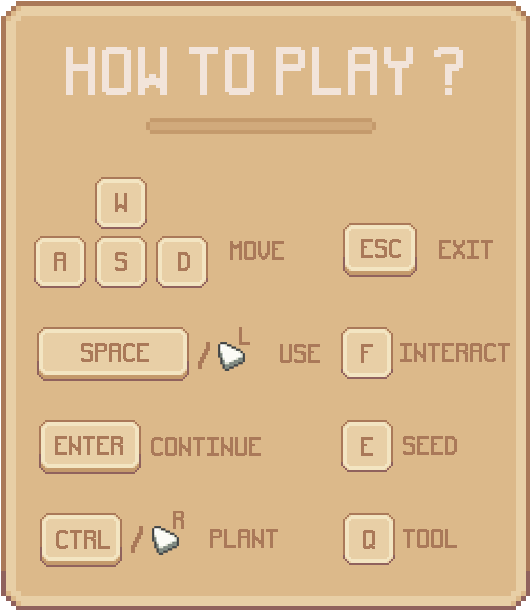
<style>
.page{position:relative;width:530px;height:610px;background:#dcb98a}
.page>*{position:absolute;margin:0}
.t1{font:61.8px "pixelFont-7-8x14-sproutLands";color:#f2e4da;scale:1.05 1}
.t2{font:24.6px "pixelFont-7-8x14-sproutLands";color:#aa7959;scale:1.05 1}
.t3{font:23.8px "pixelFont-7-8x14-sproutLands";color:#aa7959;scale:1.05 1}
.t4{font:35.1px "pixelFont-7-8x14-sproutLands";color:#aa7959;scale:1.05 1}
</style>
<div class="page">
<p class="t1" style="left:66px;top:47px;width:397px;height:48px">HOW TO PLAY ?</p>
<p class="t2" style="left:115px;top:193px;width:12px;height:19px">w</p>
<p class="t2" style="left:230px;top:241px;width:54px;height:19px">MOVE</p>
<p class="t2" style="left:361px;top:239px;width:40px;height:19px">esc</p>
<p class="t2" style="left:439px;top:240px;width:54px;height:19px">EXIT</p>
<p class="t2" style="left:54px;top:252px;width:12px;height:19px">a</p>
<p class="t2" style="left:115px;top:252px;width:12px;height:19px">s</p>
<p class="t2" style="left:178px;top:252px;width:12px;height:19px">D</p>
<p class="t3" style="left:239px;top:327px;width:11px;height:18px">l</p>
<p class="t4" style="left:198px;top:342px;width:12px;height:27px">/</p>
<p class="t2" style="left:81px;top:343px;width:68px;height:19px">SPACE</p>
<p class="t2" style="left:280px;top:344px;width:40px;height:19px">USE</p>
<p class="t2" style="left:361px;top:344px;width:12px;height:19px">f</p>
<p class="t2" style="left:400px;top:343px;width:110px;height:19px">INTERACT</p>
<p class="t2" style="left:55px;top:436px;width:68px;height:19px">enter</p>
<p class="t2" style="left:151px;top:437px;width:110px;height:19px">CONTINUE</p>
<p class="t2" style="left:361px;top:437px;width:12px;height:19px">E</p>
<p class="t2" style="left:403px;top:436px;width:54px;height:19px">SEED</p>
<p class="t3" style="left:173px;top:511px;width:11px;height:18px">R</p>
<p class="t2" style="left:56px;top:530px;width:54px;height:19px">CTRL</p>
<p class="t4" style="left:131px;top:526px;width:12px;height:27px">/</p>
<p class="t2" style="left:210px;top:529px;width:68px;height:19px">PLANT</p>
<p class="t2" style="left:363px;top:530px;width:12px;height:19px">Q</p>
<p class="t2" style="left:403px;top:529px;width:54px;height:19px">TOOL</p>
</div>
